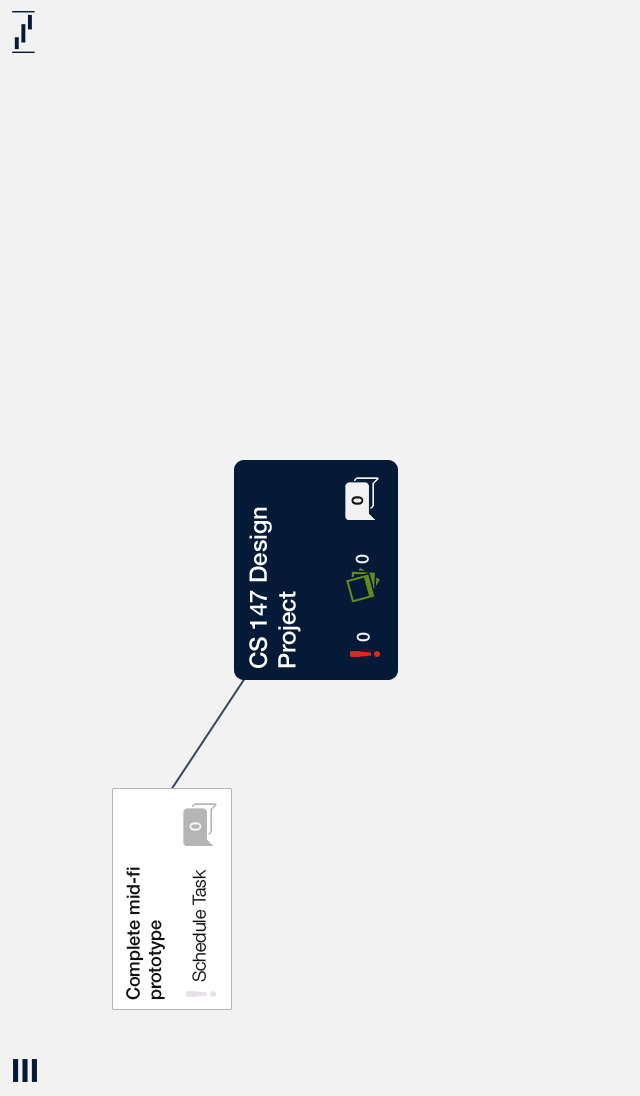
<style>
.page{position:relative;width:640px;height:1096px;background:#f2f2f2}
.page>*{position:absolute;margin:0}
.t1{font:16px "HelveticaNeue-Bold";color:#111111}
.t2{font:24px "HelveticaNeue-Medium";color:#ffffff}
.t3{font:18px "HelveticaNeue-Medium";color:#f2f2f2}
.t4{font:16px "HelveticaNeue-Bold";color:#f2f2f2}
.t5{font:18px "HelveticaNeue-Medium";color:#111111}
.t6{font:18px "HelveticaNeue-Light";color:#111111}
</style>
<div class="page">
<p class="t1" style="left:351px;top:496px;width:13px;height:9px;rotate:-90deg">0</p>
<p class="t2" style="left:249px;top:507px;width:52px;height:161px;rotate:-90deg">CS 147 Design Project</p>
<p class="t3" style="left:355px;top:554px;width:14px;height:10px;rotate:-90deg">0</p>
<p class="t3" style="left:356px;top:632px;width:14px;height:10px;rotate:-90deg">0</p>
<p class="t4" style="left:189px;top:822px;width:13px;height:9px;rotate:-90deg">0</p>
<p class="t5" style="left:126px;top:867px;width:39px;height:133px;rotate:-90deg">Complete mid-fi prototype</p>
<p class="t6" style="left:192px;top:869px;width:14px;height:113px;rotate:-90deg">Schedule Task</p>
</div>
